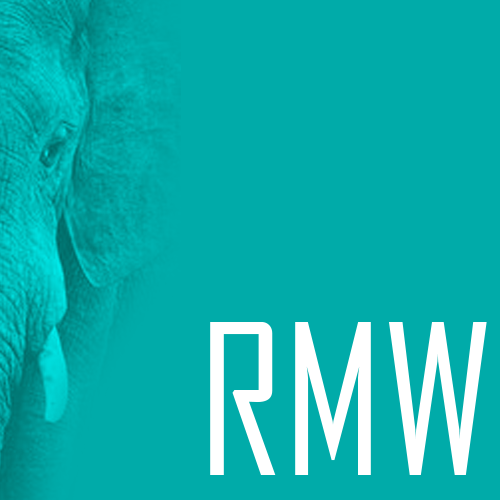
<style>
.page{position:relative;width:500px;height:500px;background:#00aba9}
.page>*{position:absolute;margin:0}
.t1{font:200px "AgencyFB-Reg";color:#ffffff}
</style>
<div class="page">
<p class="t1" style="left:210px;top:322px;width:277px;height:153px">RMW</p>
</div>
